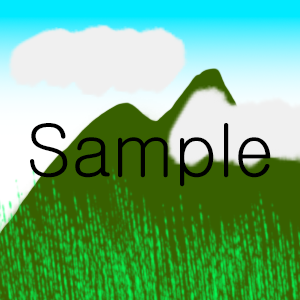
<style>
.page{position:relative;width:300px;height:300px}
.page>*{position:absolute;margin:0}
.t1{font:72px "Gulim";color:#000000}
</style>
<div class="page">
<p class="t1" style="left:30px;top:123px;width:241px;height:64px">Sample</p>
</div>
